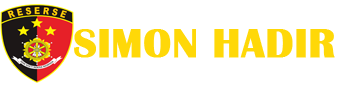
<style>
.page{position:relative;width:340px;height:85px;background:#ffffff}
.page>*{position:absolute;margin:0}
.t1{font:42.2px "BritannicBold";color:#ffd808;font-weight:bold}
</style>
<div class="page">
<p class="t1" style="left:74px;top:29px;width:261px;height:29px">SIMON HADIR</p>
</div>
